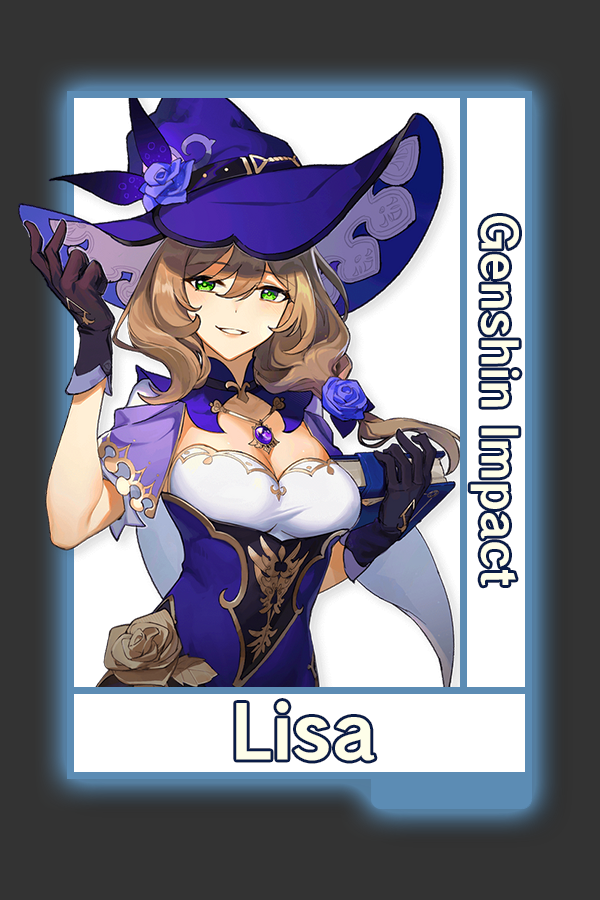
<style>
.page{position:relative;width:600px;height:900px;background:#333333}
.page>*{position:absolute;margin:0}
.t1{font:48.8px "HYWenHei-HEW";color:#fefef4}
.t2{font:75px "HYWenHei-HEW";color:#fefef4}
</style>
<div class="page">
<p class="t1" style="left:470px;top:216px;width:50px;height:370px;rotate:90deg">Genshin Impact</p>
<p class="t2" style="left:236px;top:701px;width:139px;height:60px">Lisa</p>
</div>
